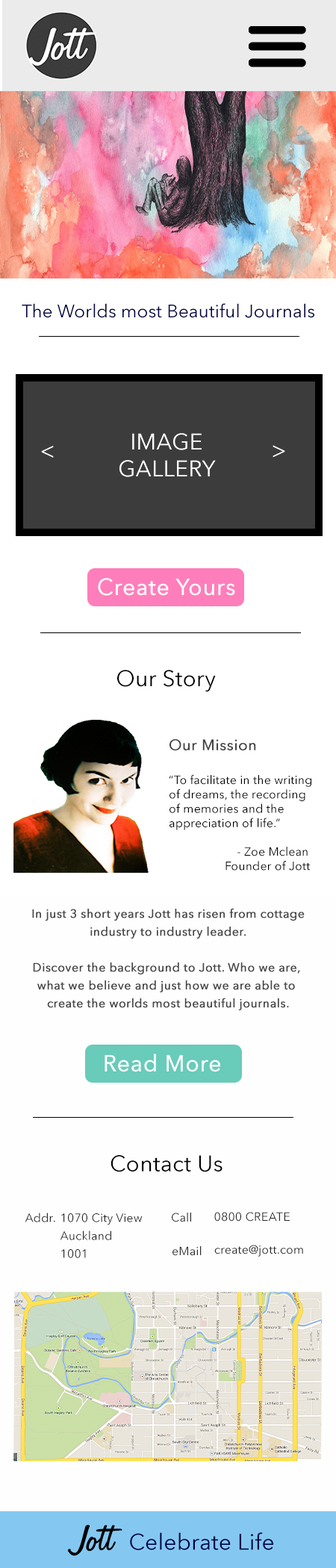
<style>
.page{position:relative;width:336px;height:1568px;background:#ffffff}
.page>*{position:absolute;margin:0}
.t1{font:17.9px "AvenirNextLTW01-Regular";letter-spacing:0.01em;color:#000044}
.t2{font:22.4px "AvenirNextLTW01-Regular";letter-spacing:0.01em;color:#ffffff}
.t3{font:22.8px "AvenirNextLTW01-Regular";letter-spacing:0.01em;color:#fefefe;font-weight:bold}
.t4{font:22.4px "AvenirNextLTW01-Regular";letter-spacing:0.01em;color:#000000}
.t5{font:14.9px "AvenirNextLTW01-Regular";letter-spacing:0.01em;color:#444444;font-weight:bold}
.t6{font:11.9px "AvenirNextLTW01-Regular";letter-spacing:0.01em;color:#000000}
.t7{font:11.9px/17.9px "AvenirNextLTW01-Regular";letter-spacing:0.01em;color:#444444;font-weight:bold}
.t8{font:11.9px "AvenirNextLTW01-Regular";letter-spacing:0.01em;color:#282828}
.t9{font:11.9px/17.9px "AvenirNextLTW01-Regular";letter-spacing:0.01em;color:#282828}
.t10{font:48.5px "Jott45Normal";letter-spacing:0.01em;color:#000000}
.t11{font:22.4px "AvenirNextLTW01-Regular";letter-spacing:0.01em;color:#000044}
</style>
<div class="page">
<p class="t1" style="left:22px;top:303px;width:292px;height:15px">The Worlds most Beautiful Journals</p>
<p class="t2" style="left:119px;top:433px;width:97px;height:44px;text-align:center">IMAGE<br>GALLERY</p>
<p class="t2" style="left:41px;top:446px;width:13px;height:12px">&lt;</p>
<p class="t2" style="left:273px;top:445px;width:12px;height:13px">&gt;</p>
<p class="t3" style="left:98px;top:578px;width:137px;height:18px">Create Yours</p>
<p class="t4" style="left:117px;top:670px;width:99px;height:22px">Our Story</p>
<p class="t5" style="left:169px;top:739px;width:87px;height:11px">Our Mission</p>
<p class="t6" style="left:169px;top:774px;width:142px;height:97px">“To facilitate in the writing <br>of dreams, the recording<br>of memories and the <br>appreciation of life.”<br><br>                      - Zoe Mclean<br>                  Founder of Jott</p>
<p class="t7" style="left:32px;top:908px;width:273px;height:102px;text-align:center">In just 3 short years Jott has risen from cottage<br>industry to industry leader.<br><br>Discover the background to Jott. Who we are, <br>what we believe and just how we are able to <br>create the worlds most beautiful journals.</p>
<p class="t3" style="left:105px;top:1054px;width:115px;height:18px">Read More</p>
<p class="t4" style="left:111px;top:1155px;width:112px;height:17px">Contact Us</p>
<p class="t8" style="left:25px;top:1213px;width:30px;height:9px">Addr.</p>
<p class="t9" style="left:60px;top:1213px;width:83px;height:45px">1070 City View<br>Auckland<br>1001</p>
<p class="t8" style="left:172px;top:1213px;width:19px;height:9px">Call</p>
<p class="t8" style="left:214px;top:1212px;width:76px;height:10px">0800 CREATE</p>
<p class="t8" style="left:172px;top:1246px;width:30px;height:10px">eMail</p>
<p class="t8" style="left:214px;top:1245px;width:89px;height:12px">create@jott.com</p>
<p class="t10" style="left:67px;top:1525px;width:23px;height:31px">J</p>
<p class="t10" style="left:86px;top:1525px;width:36px;height:27px">ott</p>
<p class="t11" style="left:130px;top:1532px;width:143px;height:18px">Celebrate Life</p>
</div>
